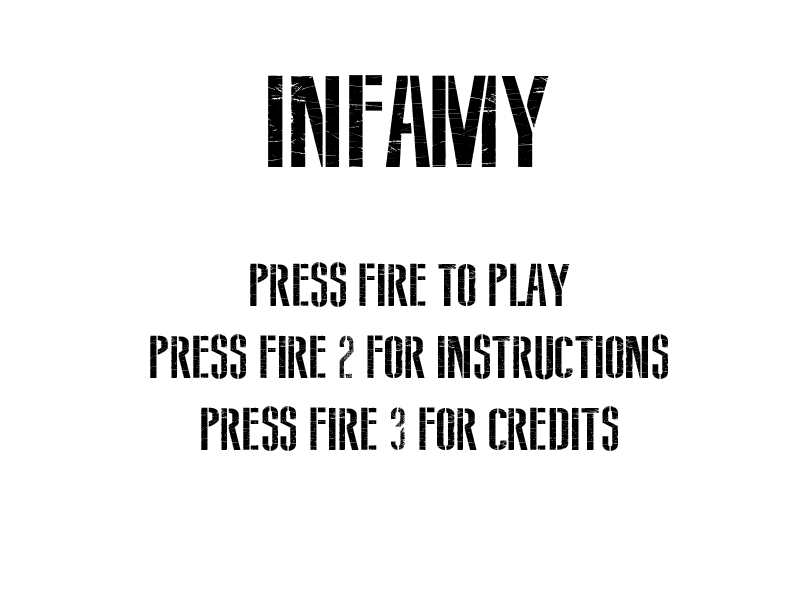
<style>
.page{position:relative;width:800px;height:600px;background:#ffffff}
.page>*{position:absolute;margin:0}
.t1{font:130px "SovietStyle";color:#000000}
.t2{font:60px "SovietStyle";color:#000000}
</style>
<div class="page">
<p class="t1" style="left:267px;top:75px;width:282px;height:92px">Infamy</p>
<p class="t2" style="left:150px;top:262px;width:518px;height:189px;text-align:center">Press fire to play<br>Press fire 2 for instructions<br>Press fire 3 for credits</p>
</div>
